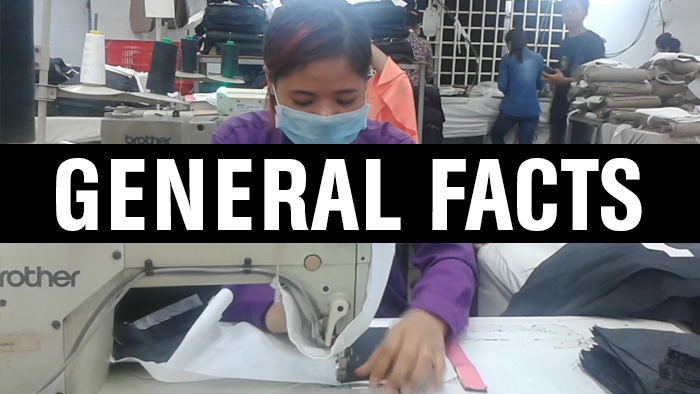
<style>
.page{position:relative;width:700px;height:394px}
.page>*{position:absolute;margin:0}
.t1{font:100px "AGBuchCondensedBQ-Medium";color:#fefefe}
</style>
<div class="page">
<p class="t1" style="left:56px;top:158px;width:586px;height:73px">GENERAL FACTS</p>
</div>
